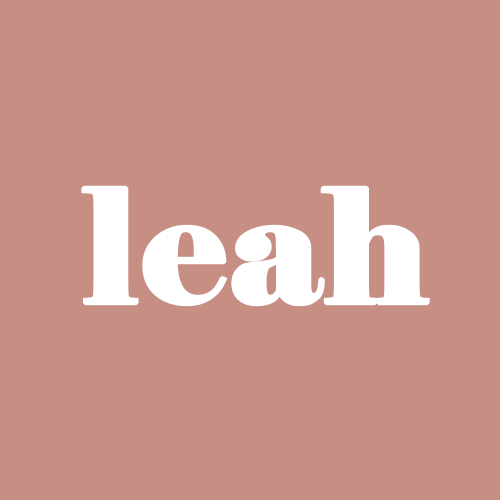
<style>
.page{position:relative;width:500px;height:500px;background:#c78e83}
.page>*{position:absolute;margin:0}
.t1{font:158px "Elephant-Regular";color:#ffffff;font-weight:bold}
</style>
<div class="page">
<p class="t1" style="left:81px;top:185px;width:349px;height:122px">leah</p>
</div>
